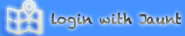
<style>
.page{position:relative;width:185px;height:36px;background:#4692fe}
.page>*{position:absolute;margin:0}
.t1{font:14px "Chalkduster"}
</style>
<div class="page">
<p class="t1" style="left:51px;top:12px;width:130px;height:17px">login with Jaunt</p>
</div>
